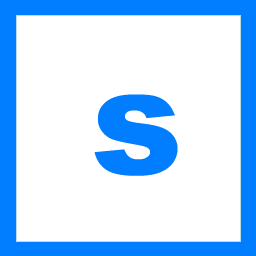
<style>
.page{position:relative;width:256px;height:256px;background:#ffffff}
.page>*{position:absolute;margin:0}
.t1{font:150px "Arial-Black";color:#007eff}
</style>
<div class="page">
<p class="t1" style="left:94px;top:94px;width:84px;height:82px">s</p>
</div>
